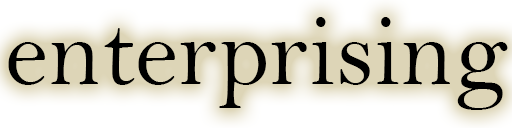
<style>
.page{position:relative;width:512px;height:128px;background:#ffffff}
.page>*{position:absolute;margin:0}
.t1{font:100px "BellMT";color:#000000}
</style>
<div class="page">
<p class="t1" style="left:8px;top:17px;width:500px;height:93px">enterprising</p>
</div>
